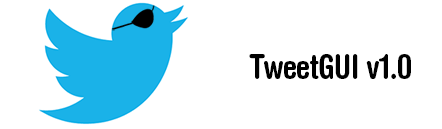
<style>
.page{position:relative;width:442px;height:129px;background:#ffffff}
.page>*{position:absolute;margin:0}
.t1{font:34.4px "HelveticaRoundedLTStd-BdCn";letter-spacing:-0.01em;color:#000000;scale:0.93 1}
</style>
<div class="page">
<p class="t1" style="left:249px;top:54px;width:162px;height:25px">TweetGUI v1.0</p>
</div>
